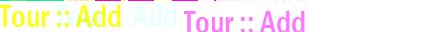
<style>
.page{position:relative;width:440px;height:32px;background:#ffffff}
.page>*{position:absolute;margin:0}
.t1{font:32px "FranklinGothic-MediumCond";color:#ffff13}
</style>
<div class="page">
<p class="t1" style="left:0px;top:4px;width:121px;height:22px">Tour :: Add</p>
</div>
